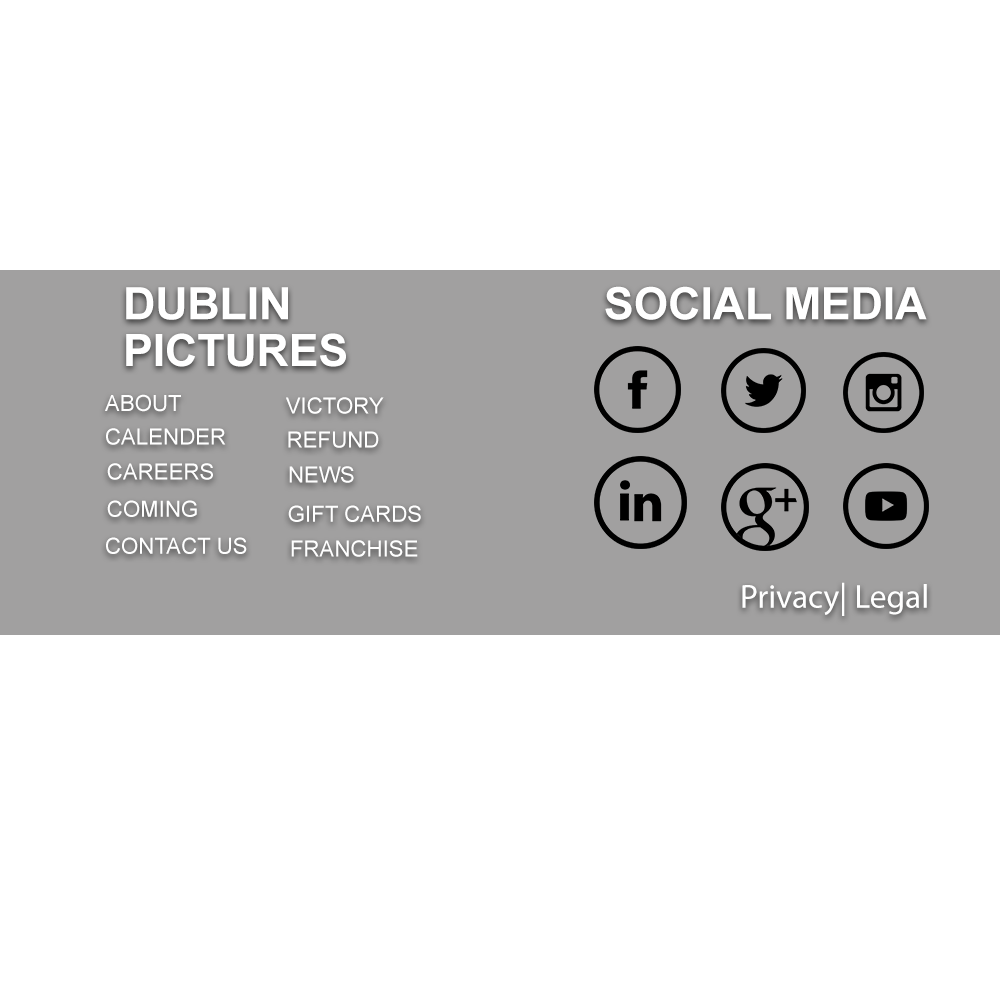
<style>
.page{position:relative;width:1000px;height:1000px;background:#ffffff}
.page>*{position:absolute;margin:0}
.t1{font:44.5px/37.5px "Arial-BoldMT";color:#ffffff}
.t2{font:44.5px "Arial-BoldMT";color:#ffffff}
.t3{font:22.2px "ArialMT";color:#ffffff}
.t4{font:33.3px "MyriadPro-Regular";color:#ffffff}
</style>
<div class="page">
<p class="t1" style="left:126px;top:287px;width:220px;height:80px">DUBLIN <br>PICTURES</p>
<p class="t2" style="left:605px;top:286px;width:322px;height:34px">SOCIAL MEDIA</p>
<p class="t3" style="left:105px;top:394px;width:76px;height:18px">ABOUT</p>
<p class="t3" style="left:286px;top:397px;width:98px;height:17px">VICTORY</p>
<p class="t3" style="left:106px;top:428px;width:120px;height:17px">CALENDER</p>
<p class="t3" style="left:288px;top:431px;width:91px;height:17px">REFUND POLICY</p>
<p class="t3" style="left:107px;top:463px;width:106px;height:17px">CAREERS</p>
<p class="t3" style="left:289px;top:466px;width:65px;height:17px">NEWS</p>
<p class="t3" style="left:107px;top:500px;width:90px;height:17px">COMING SOON</p>
<p class="t3" style="left:288px;top:505px;width:133px;height:17px">GIFT CARDS</p>
<p class="t3" style="left:106px;top:537px;width:141px;height:17px">CONTACT US</p>
<p class="t3" style="left:291px;top:540px;width:127px;height:17px">FRANCHISE</p>
<p class="t4" style="left:742px;top:582px;width:185px;height:34px">Privacy| Legal</p>
</div>
